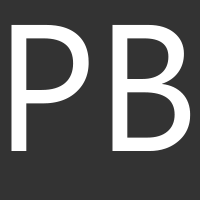
<style>
.page{position:relative;width:200px;height:200px;background:#333333}
.page>*{position:absolute;margin:0}
.t1{font:179.7px "SegoeUIHistoric";color:#ffffff}
</style>
<div class="page">
<p class="t1" style="left:11px;top:24px;width:180px;height:127px">PB</p>
</div>
